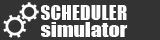
<style>
.page{position:relative;width:160px;height:40px;background:#333333}
.page>*{position:absolute;margin:0}
.t1{font:19.4px "Impact";color:#ffffff}
.t2{font:19.4px "Impact";color:#ffffff;scale:1.12 1}
</style>
<div class="page">
<p class="t1" style="left:41px;top:5px;width:86px;height:15px">SCHEDULER</p>
<p class="t2" style="left:41px;top:22px;width:87px;height:15px">simulator</p>
</div>
